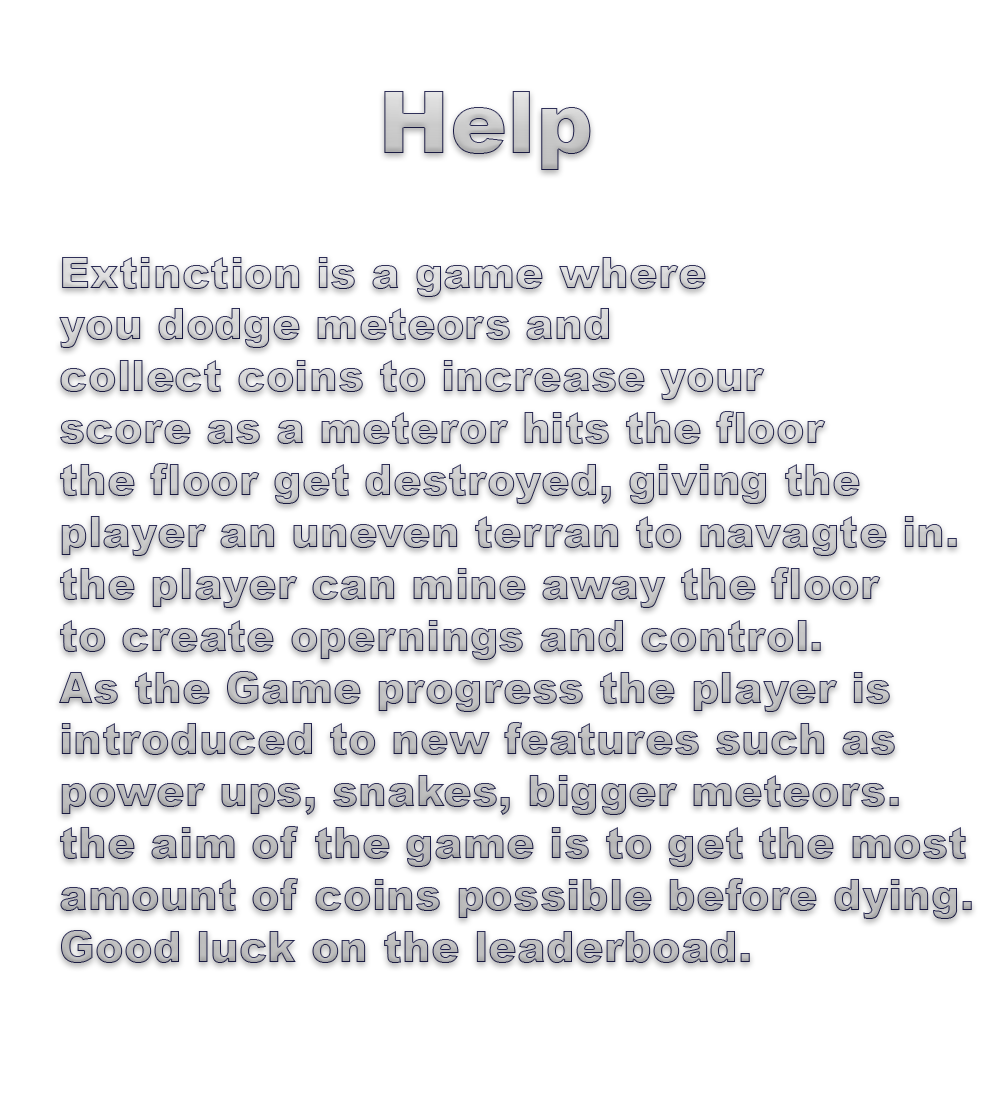
<style>
.page{position:relative;width:995px;height:1103px;background:#ffffff}
.page>*{position:absolute;margin:0}
.t1{font:85.9px "Arial-Black";color:#c8c8c8}
.t2{font:43.2px "Arial-Black"}
</style>
<div class="page">
<p class="t1" style="left:384px;top:91px;width:207px;height:79px">Help</p>
<p class="t2" style="left:59px;top:257px;width:913px;height:706px">Extinction is a game where <br>you dodge meteors and <br>collect coins to increase your<br>score as a meteror hits the floor <br>the floor get destroyed, giving the <br>player an uneven terran to navagte in.<br>the player can mine away the floor <br>to create opernings and control.<br>As the Game progress the player is <br>introduced to new features such as <br>power ups, snakes, bigger meteors.<br>the aim of the game is to get the most <br>amount of coins possible before dying.<br>Good luck on the leaderboad.</p>
</div>
